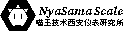
<style>
.page{position:relative;width:128px;height:32px;background:#ffffff}
.page>*{position:absolute;margin:0}
.t1{font:12px "SourceSerifItalic-BlackItalic";color:#000000}
.t2{font:8px "ChillBitmap7x";color:#000000}
</style>
<div class="page">
<p class="t1" style="left:39px;top:6px;width:84px;height:12px">NyaSama Scale</p>
<p class="t2" style="left:36px;top:19px;width:87px;height:7px">喵玉技术西安仪表研究所</p>
</div>
